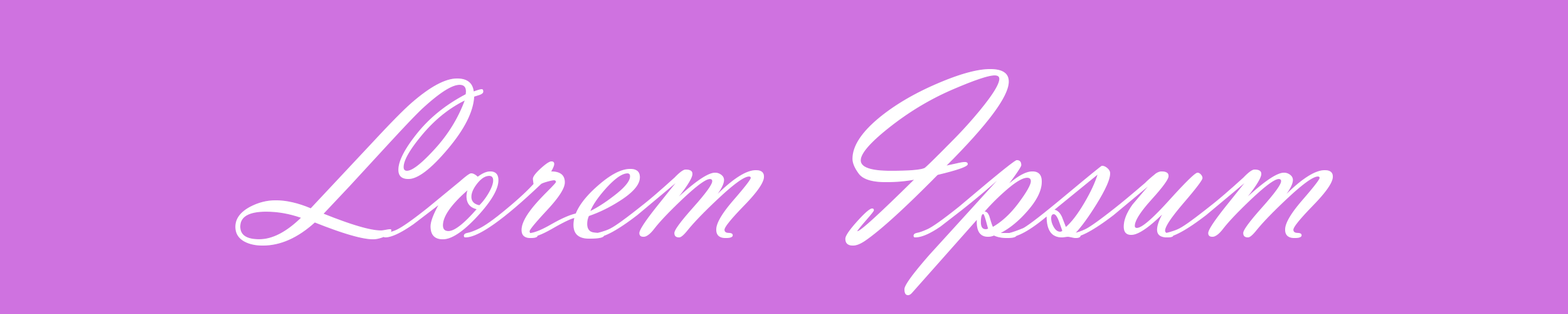
<style>
.page{position:relative;width:1568px;height:314px;background:#cf72e0}
.page>*{position:absolute;margin:0}
.t1{font:247px "VladimirScript";letter-spacing:-0.025em;color:#ffffff}
</style>
<div class="page">
<p class="t1" style="left:235px;top:69px;width:1098px;height:226px">Lorem Ipsum</p>
</div>
